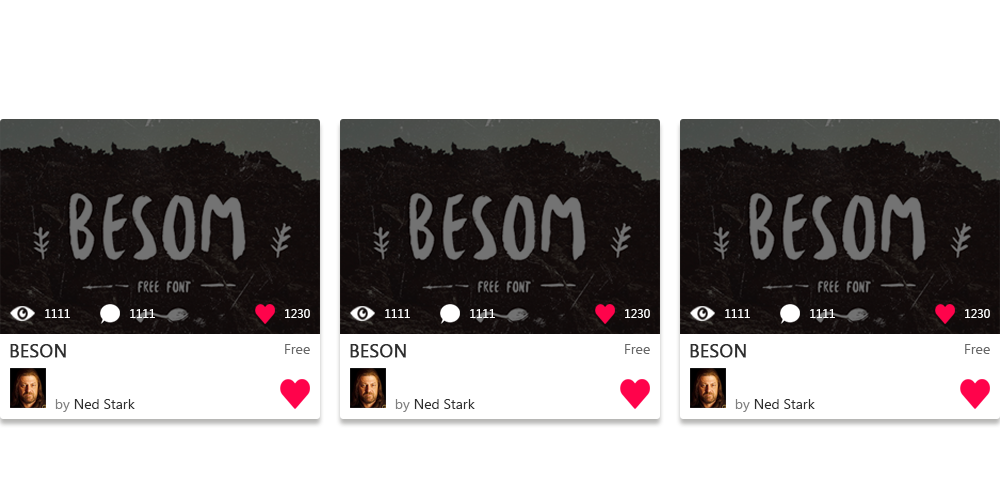
<style>
.page{position:relative;width:1000px;height:500px;background:#ffffff}
.page>*{position:absolute;margin:0}
.t1{font:12px "LaoUI";color:#ffffff}
.t2{font:18px "LaoUI";color:#2f2f2f;font-weight:bold}
.t3{font:14px "LaoUI";color:#686868}
.t4{font:14px "LaoUI";color:#2f2f2f}
.t5{font:14px "LaoUI";color:#808080}
</style>
<div class="page">
<p class="t1" style="left:45px;top:309px;width:25px;height:9px">1111</p>
<p class="t1" style="left:130px;top:309px;width:25px;height:9px">1111</p>
<p class="t1" style="left:285px;top:309px;width:25px;height:9px">1230</p>
<p class="t1" style="left:385px;top:309px;width:25px;height:9px">1111</p>
<p class="t1" style="left:470px;top:309px;width:25px;height:9px">1111</p>
<p class="t1" style="left:625px;top:309px;width:25px;height:9px">1230</p>
<p class="t1" style="left:725px;top:309px;width:25px;height:9px">1111</p>
<p class="t1" style="left:810px;top:309px;width:25px;height:9px">1111</p>
<p class="t1" style="left:965px;top:309px;width:25px;height:9px">1230</p>
<p class="t2" style="left:10px;top:344px;width:56px;height:14px">BESON</p>
<p class="t3" style="left:285px;top:344px;width:25px;height:10px">Free</p>
<p class="t2" style="left:350px;top:344px;width:56px;height:14px">BESON</p>
<p class="t3" style="left:625px;top:344px;width:25px;height:10px">Free</p>
<p class="t2" style="left:690px;top:344px;width:56px;height:14px">BESON</p>
<p class="t3" style="left:965px;top:344px;width:25px;height:10px">Free</p>
<p class="t4" style="left:55px;top:399px;width:80px;height:13px"><span class="t5">by </span>Ned Stark</p>
<p class="t4" style="left:395px;top:399px;width:80px;height:13px"><span class="t5">by </span>Ned Stark</p>
<p class="t4" style="left:735px;top:399px;width:80px;height:13px"><span class="t5">by </span>Ned Stark</p>
</div>
